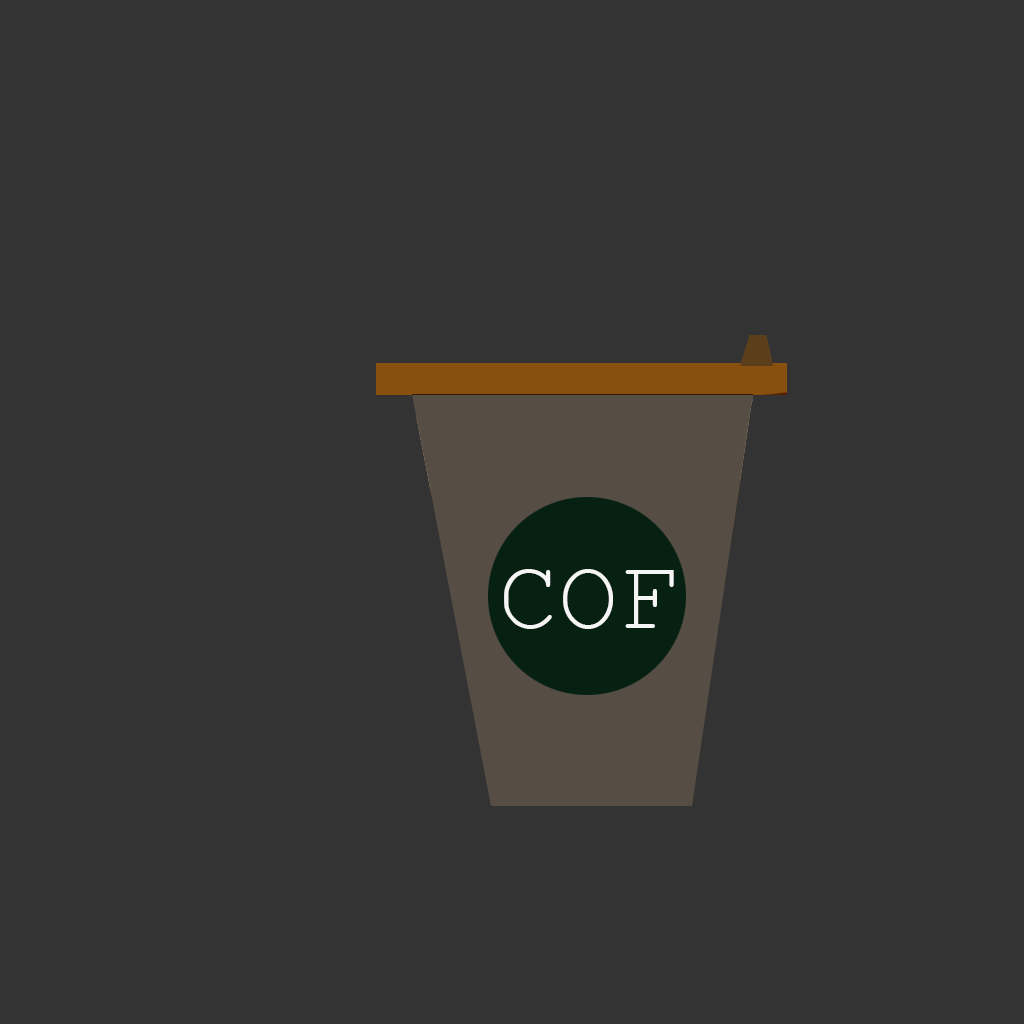
<style>
.page{position:relative;width:1024px;height:1024px;background:#333333}
.page>*{position:absolute;margin:0}
.t1{font:100px "CourierNewPSMT";color:#f5f5f5}
</style>
<div class="page">
<p class="t1" style="left:504px;top:569px;width:170px;height:60px">COF</p>
</div>
